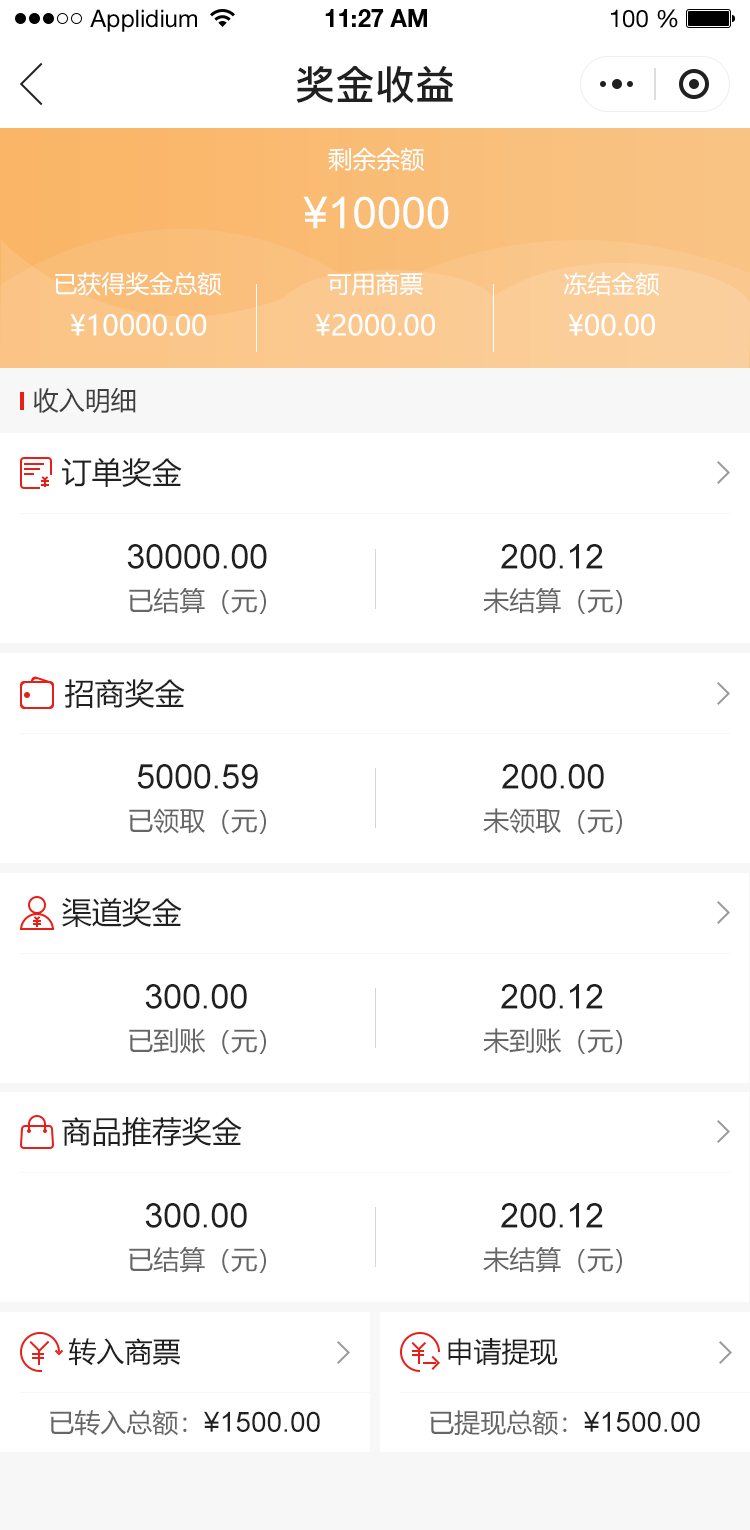
<style>
.page{position:relative;width:750px;height:1530px;background:#ffffff}
.page>*{position:absolute;margin:0}
.t1{font:24px "HelveticaNeueLTStd-Roman";color:#000000}
.t2{font:24px "HelveticaNeueLTStd-Bd";color:#000000}
.t3{font:40px "PingFang-SC-Bold";color:#202020;text-transform:uppercase}
.t4{font:24px "MicrosoftYaHei";color:#ffffff;text-transform:uppercase}
.t5{font:44px "ArialMT";color:#ffffff;text-transform:uppercase}
.t6{font:28px "MicrosoftYaHei";color:#ffffff;text-transform:uppercase}
.t7{font:26px "MicrosoftYaHei";color:#404040;text-transform:uppercase}
.t8{font:30px "MicrosoftYaHei";color:#202020;text-transform:uppercase}
.t9{font:34px "ArialMT";color:#202020;text-transform:uppercase}
.t10{font:26px "MicrosoftYaHei";color:#666666;text-transform:uppercase}
.t11{font:28px "MicrosoftYaHei";color:#202020;text-transform:uppercase}
.t12{font:28px "ArialMT";color:#202020;text-transform:uppercase}
</style>
<div class="page">
<p class="t1" style="left:90px;top:9px;width:107px;height:23px">Applidium</p>
<p class="t2" style="left:325px;top:9px;width:102px;height:18px">11:27 AM</p>
<p class="t1" style="left:611px;top:9px;width:67px;height:19px">100 %</p>
<p class="t3" style="left:296px;top:65px;width:158px;height:38px">奖金收益</p>
<p class="t4" style="left:328px;top:147px;width:97px;height:25px">剩余余额</p>
<p class="t5" style="left:303px;top:196px;width:146px;height:33px">¥10000</p>
<p class="t4" style="left:55px;top:272px;width:167px;height:24px">已获得奖金总额</p>
<p class="t4" style="left:327px;top:272px;width:96px;height:24px">可用商票</p>
<p class="t4" style="left:563px;top:272px;width:97px;height:24px">冻结金额</p>
<p class="t6" style="left:70px;top:314px;width:137px;height:22px">¥10000.00</p>
<p class="t6" style="left:315px;top:314px;width:120px;height:22px">¥2000.00</p>
<p class="t6" style="left:568px;top:314px;width:87px;height:22px">¥00.00</p>
<p class="t7" style="left:33px;top:387px;width:103px;height:26px">收入明细</p>
<p class="t8" style="left:62px;top:457px;width:120px;height:30px">订单奖金</p>
<p class="t9" style="left:127px;top:544px;width:140px;height:25px">30000.00</p>
<p class="t9" style="left:501px;top:544px;width:102px;height:25px">200.12</p>
<p class="t10" style="left:129px;top:588px;width:137px;height:26px">已结算（元）</p>
<p class="t10" style="left:483px;top:588px;width:139px;height:26px">未结算（元）</p>
<p class="t8" style="left:65px;top:679px;width:120px;height:29px">招商奖金</p>
<p class="t9" style="left:137px;top:764px;width:121px;height:25px">5000.59</p>
<p class="t9" style="left:502px;top:764px;width:102px;height:25px">200.00</p>
<p class="t10" style="left:129px;top:808px;width:137px;height:26px">已领取（元）</p>
<p class="t10" style="left:483px;top:808px;width:139px;height:26px">未领取（元）</p>
<p class="t8" style="left:62px;top:897px;width:120px;height:30px">渠道奖金</p>
<p class="t9" style="left:145px;top:984px;width:102px;height:25px">300.00</p>
<p class="t9" style="left:501px;top:984px;width:102px;height:25px">200.12</p>
<p class="t10" style="left:129px;top:1028px;width:137px;height:26px">已到账（元）</p>
<p class="t10" style="left:483px;top:1028px;width:139px;height:26px">未到账（元）</p>
<p class="t8" style="left:62px;top:1117px;width:180px;height:30px">商品推荐奖金</p>
<p class="t9" style="left:145px;top:1203px;width:102px;height:25px">300.00</p>
<p class="t9" style="left:501px;top:1203px;width:102px;height:25px">200.12</p>
<p class="t10" style="left:129px;top:1247px;width:137px;height:26px">已结算（元）</p>
<p class="t10" style="left:483px;top:1247px;width:139px;height:26px">未结算（元）</p>
<p class="t11" style="left:68px;top:1338px;width:112px;height:28px">转入商票</p>
<p class="t11" style="left:448px;top:1338px;width:110px;height:28px">申请提现</p>
<p class="t12" style="left:50px;top:1410px;width:270px;height:26px"><span class="t10">已转入总额：</span>¥1500.00</p>
<p class="t12" style="left:430px;top:1410px;width:270px;height:26px"><span class="t10">已提现总额：</span>¥1500.00</p>
</div>
